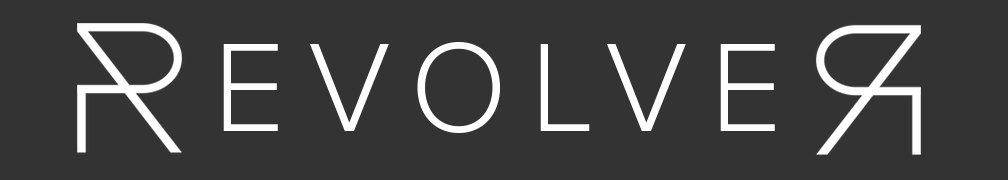
<style>
.page{position:relative;width:1008px;height:180px;background:#333333}
.page>*{position:absolute;margin:0}
.t1{font:129.9px "ProximaNova-Light";letter-spacing:0.175em;color:#ffffff}
</style>
<div class="page">
<p class="t1" style="left:223px;top:42px;width:552px;height:91px">EVOLVE</p>
</div>
